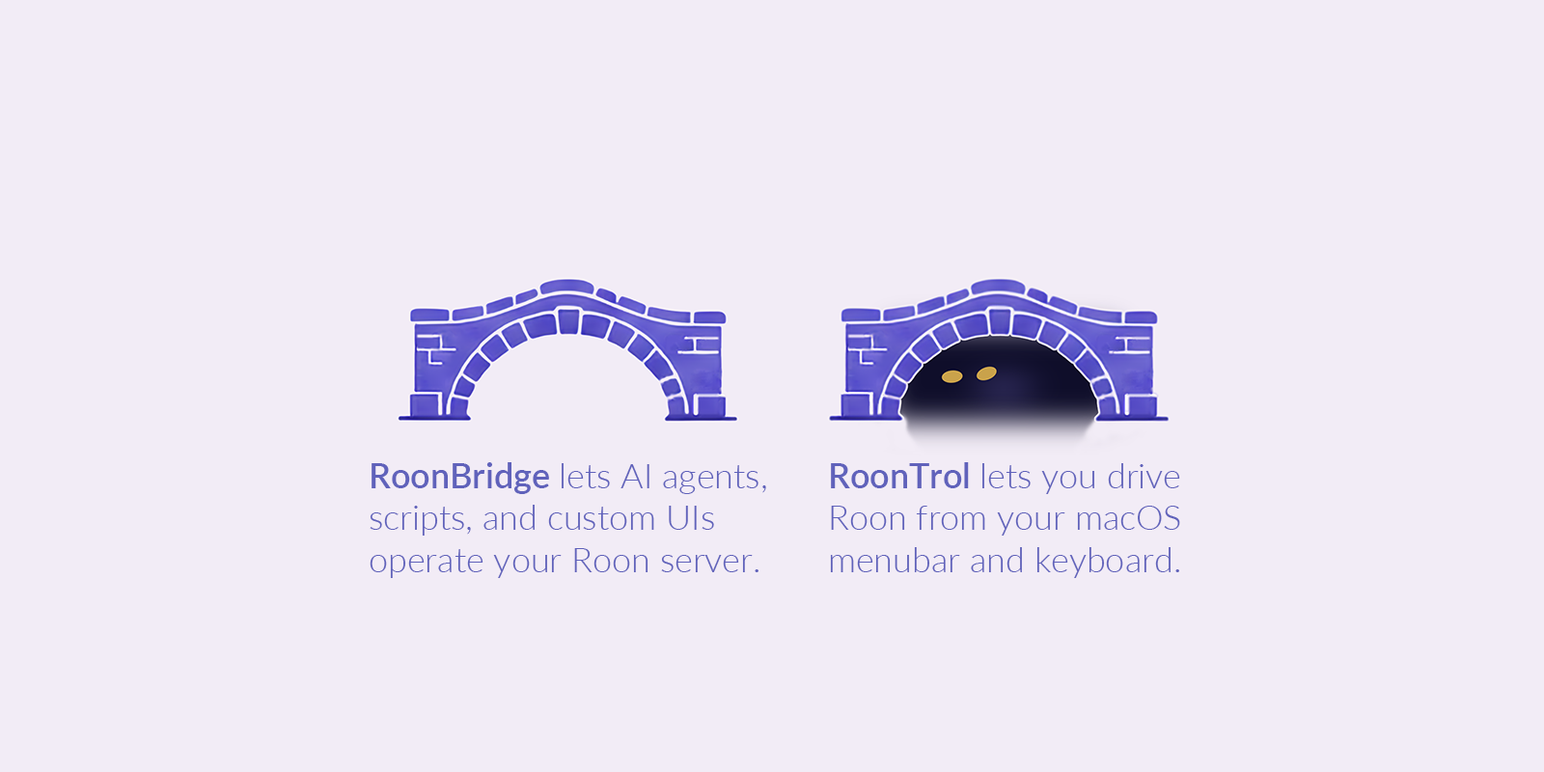
<style>
.page{position:relative;width:1544px;height:772px;background:#f2ecf6}
.page>*{position:absolute;margin:0}
.t1{font:34.7px "Lato-Light";color:#6062bb}
.t2{font:34.7px "Lato-Semibold";color:#6062bb}
</style>
<div class="page">
<p class="t1" style="left:370px;top:462px;width:396px;height:116px"><span class="t2">RoonBridge </span>lets AI agents, scripts, and custom UIs operate your Roon server.</p>
<p class="t1" style="left:830px;top:462px;width:350px;height:116px"><span class="t2">RoonTrol </span>lets you drive Roon from your macOS menubar and keyboard.</p>
</div>
